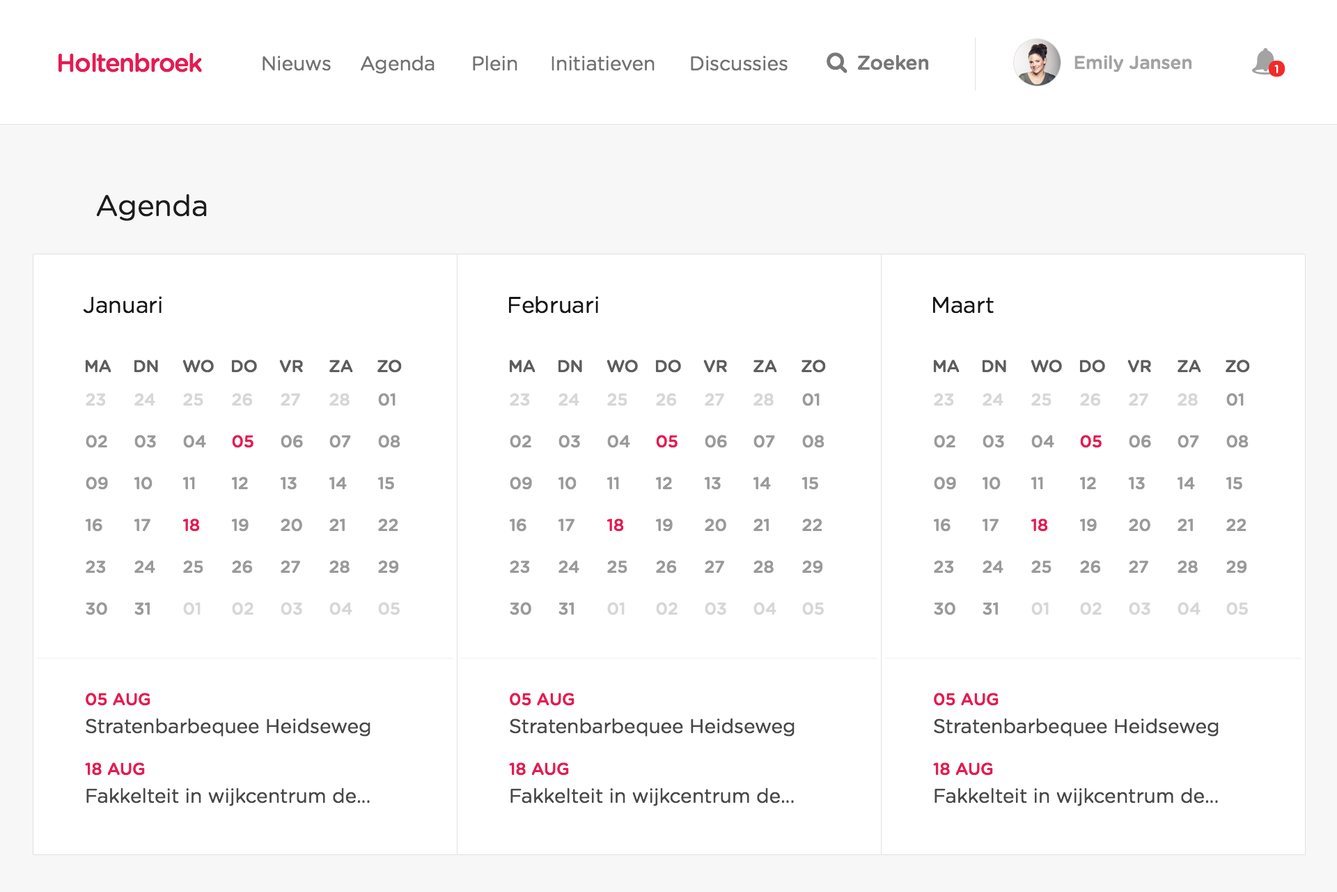
<style>
.page{position:relative;width:1337px;height:892px;background:#ffffff}
.page>*{position:absolute;margin:0}
.t1{font:25.1px "GothamRounded-Medium";letter-spacing:-0.04em;color:#e61a54}
.t2{font:19.5px "GothamRounded-Book";color:#737373}
.t3{font:19.5px "GothamRounded-Medium";color:#787878}
.t4{font:18.1px "GothamRounded-Medium";color:#a3a3a3}
.t5{font:11.4px "GothamRounded-Medium";color:#ffffff}
.t6{font:29.3px "GothamRounded-Book";color:#1e1d1d}
.t7{font:22.3px "GothamRounded-Book";color:#171717}
.t8{font:16.7px "GothamRounded-Medium";color:#5e5e5e}
.t9{font:16.7px "GothamRounded-Medium";color:#d7d7d7}
.t10{font:16.7px "GothamRounded-Medium";color:#9a9a9a}
.t11{font:16.7px "GothamRounded-Medium";color:#e61a54}
.t12{font:19.5px "GothamRounded-Book";color:#494949}
</style>
<div class="page">
<p class="t1" style="left:58px;top:53px;width:144px;height:19px">Holtenbroek</p>
<p class="t2" style="left:263px;top:56px;width:68px;height:15px">Nieuws</p>
<p class="t2" style="left:361px;top:55px;width:74px;height:19px">Agenda</p>
<p class="t2" style="left:473px;top:55px;width:45px;height:16px">Plein</p>
<p class="t2" style="left:552px;top:56px;width:103px;height:15px">Initiatieven</p>
<p class="t2" style="left:691px;top:56px;width:97px;height:15px">Discussies</p>
<p class="t3" style="left:857px;top:54px;width:72px;height:16px">Zoeken</p>
<p class="t4" style="left:1075px;top:55px;width:118px;height:17px">Emily Jansen</p>
<p class="t5" style="left:1275px;top:65px;width:4px;height:8px">1</p>
<p class="t6" style="left:96px;top:194px;width:111px;height:27px">Agenda</p>
<p class="t7" style="left:83px;top:296px;width:79px;height:17px">Januari</p>
<p class="t7" style="left:508px;top:295px;width:90px;height:18px">Februari</p>
<p class="t7" style="left:933px;top:296px;width:61px;height:17px">Maart</p>
<p class="t8" style="left:85px;top:359px;width:26px;height:14px">MA</p>
<p class="t8" style="left:134px;top:359px;width:24px;height:14px">DN</p>
<p class="t8" style="left:182px;top:359px;width:32px;height:14px">WO</p>
<p class="t8" style="left:231px;top:359px;width:26px;height:14px">DO</p>
<p class="t8" style="left:279px;top:359px;width:24px;height:14px">VR</p>
<p class="t8" style="left:329px;top:359px;width:24px;height:14px">ZA</p>
<p class="t8" style="left:378px;top:359px;width:24px;height:14px">ZO</p>
<p class="t8" style="left:509px;top:359px;width:27px;height:14px">MA</p>
<p class="t8" style="left:558px;top:359px;width:24px;height:14px">DN</p>
<p class="t8" style="left:607px;top:359px;width:31px;height:14px">WO</p>
<p class="t8" style="left:655px;top:359px;width:26px;height:14px">DO</p>
<p class="t8" style="left:704px;top:359px;width:23px;height:14px">VR</p>
<p class="t8" style="left:754px;top:359px;width:23px;height:14px">ZA</p>
<p class="t8" style="left:802px;top:359px;width:24px;height:14px">ZO</p>
<p class="t8" style="left:933px;top:359px;width:27px;height:14px">MA</p>
<p class="t8" style="left:982px;top:359px;width:25px;height:14px">DN</p>
<p class="t8" style="left:1031px;top:359px;width:31px;height:14px">WO</p>
<p class="t8" style="left:1080px;top:359px;width:25px;height:14px">DO</p>
<p class="t8" style="left:1128px;top:359px;width:23px;height:14px">VR</p>
<p class="t8" style="left:1178px;top:359px;width:24px;height:14px">ZA</p>
<p class="t8" style="left:1226px;top:359px;width:24px;height:14px">ZO</p>
<p class="t9" style="left:86px;top:393px;width:20px;height:13px">23</p>
<p class="t9" style="left:134px;top:393px;width:21px;height:13px">24</p>
<p class="t9" style="left:183px;top:393px;width:20px;height:13px">25</p>
<p class="t9" style="left:232px;top:393px;width:21px;height:13px">26</p>
<p class="t9" style="left:281px;top:393px;width:19px;height:13px">27</p>
<p class="t9" style="left:329px;top:393px;width:21px;height:13px">28</p>
<p class="t10" style="left:378px;top:393px;width:18px;height:13px">01</p>
<p class="t9" style="left:510px;top:393px;width:20px;height:13px">23</p>
<p class="t9" style="left:559px;top:393px;width:21px;height:13px">24</p>
<p class="t9" style="left:607px;top:393px;width:21px;height:13px">25</p>
<p class="t9" style="left:656px;top:393px;width:21px;height:13px">26</p>
<p class="t9" style="left:705px;top:393px;width:19px;height:13px">27</p>
<p class="t9" style="left:754px;top:393px;width:20px;height:13px">28</p>
<p class="t10" style="left:802px;top:393px;width:18px;height:13px">01</p>
<p class="t9" style="left:934px;top:393px;width:20px;height:13px">23</p>
<p class="t9" style="left:983px;top:393px;width:21px;height:13px">24</p>
<p class="t9" style="left:1032px;top:393px;width:20px;height:13px">25</p>
<p class="t9" style="left:1080px;top:393px;width:21px;height:13px">26</p>
<p class="t9" style="left:1129px;top:393px;width:20px;height:13px">27</p>
<p class="t9" style="left:1178px;top:393px;width:20px;height:13px">28</p>
<p class="t10" style="left:1227px;top:393px;width:17px;height:13px">01</p>
<p class="t10" style="left:86px;top:435px;width:21px;height:13px">02</p>
<p class="t10" style="left:134px;top:435px;width:22px;height:13px">03</p>
<p class="t10" style="left:183px;top:435px;width:23px;height:13px">04</p>
<p class="t11" style="left:232px;top:435px;width:22px;height:13px">05</p>
<p class="t10" style="left:281px;top:435px;width:22px;height:13px">06</p>
<p class="t10" style="left:329px;top:435px;width:22px;height:13px">07</p>
<p class="t10" style="left:378px;top:435px;width:23px;height:13px">08</p>
<p class="t10" style="left:510px;top:435px;width:21px;height:13px">02</p>
<p class="t10" style="left:559px;top:435px;width:21px;height:13px">03</p>
<p class="t10" style="left:607px;top:435px;width:23px;height:13px">04</p>
<p class="t11" style="left:656px;top:435px;width:22px;height:13px">05</p>
<p class="t10" style="left:705px;top:435px;width:22px;height:13px">06</p>
<p class="t10" style="left:754px;top:435px;width:21px;height:13px">07</p>
<p class="t10" style="left:802px;top:435px;width:23px;height:13px">08</p>
<p class="t10" style="left:934px;top:435px;width:22px;height:13px">02</p>
<p class="t10" style="left:983px;top:435px;width:21px;height:13px">03</p>
<p class="t10" style="left:1032px;top:435px;width:23px;height:13px">04</p>
<p class="t11" style="left:1080px;top:435px;width:22px;height:13px">05</p>
<p class="t10" style="left:1129px;top:435px;width:22px;height:13px">06</p>
<p class="t10" style="left:1178px;top:435px;width:21px;height:13px">07</p>
<p class="t10" style="left:1227px;top:435px;width:22px;height:13px">08</p>
<p class="t10" style="left:86px;top:476px;width:22px;height:14px">09</p>
<p class="t10" style="left:134px;top:476px;width:19px;height:14px">10</p>
<p class="t10" style="left:182px;top:476px;width:13px;height:14px">11</p>
<p class="t10" style="left:231px;top:476px;width:17px;height:14px">12</p>
<p class="t10" style="left:280px;top:476px;width:17px;height:14px">13</p>
<p class="t10" style="left:329px;top:476px;width:18px;height:14px">14</p>
<p class="t10" style="left:378px;top:476px;width:16px;height:14px">15</p>
<p class="t10" style="left:510px;top:476px;width:22px;height:14px">09</p>
<p class="t10" style="left:558px;top:476px;width:19px;height:14px">10</p>
<p class="t10" style="left:607px;top:476px;width:12px;height:14px">11</p>
<p class="t10" style="left:655px;top:476px;width:17px;height:14px">12</p>
<p class="t10" style="left:704px;top:476px;width:17px;height:14px">13</p>
<p class="t10" style="left:753px;top:476px;width:18px;height:14px">14</p>
<p class="t10" style="left:802px;top:476px;width:16px;height:14px">15</p>
<p class="t10" style="left:934px;top:476px;width:22px;height:14px">09</p>
<p class="t10" style="left:982px;top:476px;width:19px;height:14px">10</p>
<p class="t10" style="left:1031px;top:476px;width:12px;height:14px">11</p>
<p class="t10" style="left:1080px;top:476px;width:16px;height:14px">12</p>
<p class="t10" style="left:1128px;top:476px;width:17px;height:14px">13</p>
<p class="t10" style="left:1177px;top:476px;width:18px;height:14px">14</p>
<p class="t10" style="left:1226px;top:476px;width:17px;height:14px">15</p>
<p class="t10" style="left:85px;top:518px;width:17px;height:13px">16</p>
<p class="t10" style="left:134px;top:518px;width:16px;height:13px">17</p>
<p class="t11" style="left:182px;top:518px;width:18px;height:13px">18</p>
<p class="t10" style="left:231px;top:518px;width:18px;height:13px">19</p>
<p class="t10" style="left:281px;top:518px;width:21px;height:13px">20</p>
<p class="t10" style="left:329px;top:518px;width:16px;height:13px">21</p>
<p class="t10" style="left:378px;top:518px;width:20px;height:13px">22</p>
<p class="t10" style="left:509px;top:518px;width:18px;height:13px">16</p>
<p class="t10" style="left:558px;top:518px;width:17px;height:13px">17</p>
<p class="t11" style="left:607px;top:518px;width:17px;height:13px">18</p>
<p class="t10" style="left:655px;top:518px;width:18px;height:13px">19</p>
<p class="t10" style="left:705px;top:518px;width:22px;height:13px">20</p>
<p class="t10" style="left:754px;top:518px;width:15px;height:13px">21</p>
<p class="t10" style="left:802px;top:518px;width:21px;height:13px">22</p>
<p class="t10" style="left:933px;top:518px;width:18px;height:13px">16</p>
<p class="t10" style="left:982px;top:518px;width:17px;height:13px">17</p>
<p class="t11" style="left:1031px;top:518px;width:17px;height:13px">18</p>
<p class="t10" style="left:1080px;top:518px;width:17px;height:13px">19</p>
<p class="t10" style="left:1129px;top:518px;width:22px;height:13px">20</p>
<p class="t10" style="left:1178px;top:518px;width:15px;height:13px">21</p>
<p class="t10" style="left:1227px;top:518px;width:20px;height:13px">22</p>
<p class="t10" style="left:86px;top:560px;width:20px;height:13px">23</p>
<p class="t10" style="left:134px;top:560px;width:21px;height:13px">24</p>
<p class="t10" style="left:183px;top:560px;width:20px;height:13px">25</p>
<p class="t10" style="left:232px;top:560px;width:21px;height:13px">26</p>
<p class="t10" style="left:281px;top:560px;width:19px;height:13px">27</p>
<p class="t10" style="left:329px;top:560px;width:21px;height:13px">28</p>
<p class="t10" style="left:378px;top:560px;width:21px;height:13px">29</p>
<p class="t10" style="left:510px;top:560px;width:20px;height:13px">23</p>
<p class="t10" style="left:559px;top:560px;width:21px;height:13px">24</p>
<p class="t10" style="left:607px;top:560px;width:21px;height:13px">25</p>
<p class="t10" style="left:656px;top:560px;width:21px;height:13px">26</p>
<p class="t10" style="left:705px;top:560px;width:19px;height:13px">27</p>
<p class="t10" style="left:754px;top:560px;width:20px;height:13px">28</p>
<p class="t10" style="left:802px;top:560px;width:21px;height:13px">29</p>
<p class="t10" style="left:934px;top:560px;width:20px;height:13px">23</p>
<p class="t10" style="left:983px;top:560px;width:21px;height:13px">24</p>
<p class="t10" style="left:1032px;top:560px;width:20px;height:13px">25</p>
<p class="t10" style="left:1080px;top:560px;width:21px;height:13px">26</p>
<p class="t10" style="left:1129px;top:560px;width:20px;height:13px">27</p>
<p class="t10" style="left:1178px;top:560px;width:20px;height:13px">28</p>
<p class="t10" style="left:1227px;top:560px;width:21px;height:13px">29</p>
<p class="t10" style="left:86px;top:602px;width:21px;height:13px">30</p>
<p class="t10" style="left:134px;top:602px;width:16px;height:13px">31</p>
<p class="t9" style="left:183px;top:602px;width:18px;height:13px">01</p>
<p class="t9" style="left:232px;top:602px;width:22px;height:13px">02</p>
<p class="t9" style="left:281px;top:602px;width:21px;height:13px">03</p>
<p class="t9" style="left:329px;top:602px;width:23px;height:13px">04</p>
<p class="t9" style="left:378px;top:602px;width:22px;height:13px">05</p>
<p class="t10" style="left:510px;top:602px;width:21px;height:13px">30</p>
<p class="t10" style="left:559px;top:602px;width:15px;height:13px">31</p>
<p class="t9" style="left:607px;top:602px;width:18px;height:13px">01</p>
<p class="t9" style="left:656px;top:602px;width:22px;height:13px">02</p>
<p class="t9" style="left:705px;top:602px;width:22px;height:13px">03</p>
<p class="t9" style="left:754px;top:602px;width:23px;height:13px">04</p>
<p class="t9" style="left:802px;top:602px;width:22px;height:13px">05</p>
<p class="t10" style="left:934px;top:602px;width:22px;height:13px">30</p>
<p class="t10" style="left:983px;top:602px;width:15px;height:13px">31</p>
<p class="t9" style="left:1032px;top:602px;width:17px;height:13px">01</p>
<p class="t9" style="left:1080px;top:602px;width:22px;height:13px">02</p>
<p class="t9" style="left:1129px;top:602px;width:22px;height:13px">03</p>
<p class="t9" style="left:1178px;top:602px;width:23px;height:13px">04</p>
<p class="t9" style="left:1227px;top:602px;width:21px;height:13px">05</p>
<p class="t11" style="left:86px;top:692px;width:64px;height:14px">05 AUG</p>
<p class="t11" style="left:510px;top:692px;width:65px;height:14px">05 AUG</p>
<p class="t11" style="left:934px;top:692px;width:65px;height:14px">05 AUG</p>
<p class="t12" style="left:86px;top:717px;width:285px;height:19px">Stratenbarbequee Heidseweg</p>
<p class="t12" style="left:510px;top:717px;width:285px;height:19px">Stratenbarbequee Heidseweg</p>
<p class="t12" style="left:934px;top:717px;width:285px;height:19px">Stratenbarbequee Heidseweg</p>
<p class="t11" style="left:85px;top:762px;width:60px;height:13px">18 AUG</p>
<p class="t11" style="left:509px;top:762px;width:60px;height:13px">18 AUG</p>
<p class="t11" style="left:933px;top:762px;width:60px;height:13px">18 AUG</p>
<p class="t12" style="left:86px;top:787px;width:284px;height:19px">Fakkelteit in wijkcentrum de...</p>
<p class="t12" style="left:511px;top:787px;width:283px;height:19px">Fakkelteit in wijkcentrum de...</p>
<p class="t12" style="left:935px;top:787px;width:283px;height:19px">Fakkelteit in wijkcentrum de...</p>
</div>
